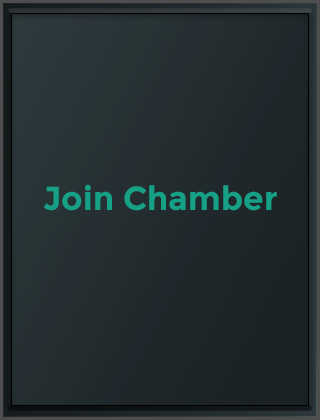
<style>
.page{position:relative;width:320px;height:420px}
.page>*{position:absolute;margin:0}
.t1{font:33.3px "Montserrat-Bold";color:#16a085}
</style>
<div class="page">
<p class="t1" style="left:43px;top:184px;width:234px;height:27px">Join Chamber</p>
</div>
